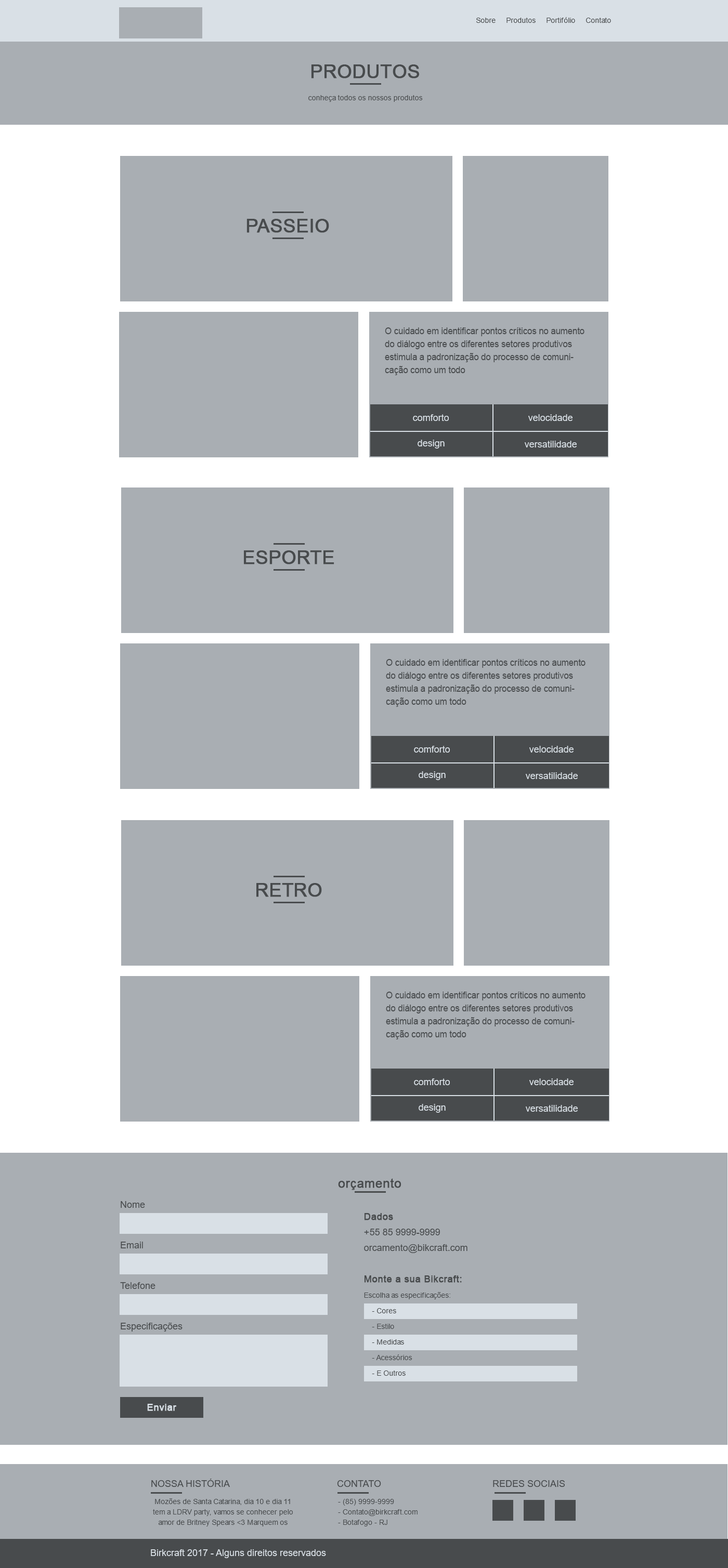
<style>
.page{position:relative;width:728px;height:1568px;background:#a9aeb3}
.page>*{position:absolute;margin:0}
.t1{font:7.3px "ArialMT";color:#484b4d}
.t2{font:18.7px "ArialMT";color:#484b4d;text-transform:uppercase;font-weight:bold}
.t3{font:9.4px/13px "ArialMT";color:#484b4d;scale:0.93 1}
.t4{font:9.4px "ArialMT";color:#d9e0e6}
.t5{font:12.5px "ArialMT";color:#484b4d;font-weight:bold}
.t6{font:9.4px "ArialMT";color:#484b4d}
.t7{font:7.3px/15.6px "ArialMT";color:#484b4d}
.t8{font:9.4px/15.6px "ArialMT";color:#484b4d;font-weight:bold}
.t9{font:9.4px/15.6px "ArialMT";color:#484b4d}
.t10{font:9.4px "ArialMT";color:#d9e0e6;font-weight:bold}
.t11{font:9.4px "ArialMT";color:#484b4d;text-transform:uppercase}
.t12{font:7.3px/10.4px "ArialMT";color:#484b4d}
.t13{font:7.3px/10.4px "ArialMT";color:#d9e0e6}
</style>
<div class="page">
<p class="t1" style="left:476px;top:17px;width:135px;height:6px">Sobre     Produtos     Portifólio     Contato</p>
<p class="t2" style="left:311px;top:64px;width:108px;height:14px">produtos</p>
<p class="t1" style="left:308px;top:95px;width:115px;height:7px">conheça todos os nossos produtos</p>
<p class="t2" style="left:246px;top:219px;width:83px;height:14px">passeio</p>
<p class="t3" style="left:385px;top:327px;width:199px;height:48px">O cuidado em identificar pontos críticos no aumento do diálogo entre os diferentes setores produtivos estimula a padronização do processo de comunicação como um todo</p>
<p class="t4" style="left:413px;top:414px;width:36px;height:7px">comforto</p>
<p class="t4" style="left:528px;top:414px;width:44px;height:7px">velocidade</p>
<p class="t4" style="left:417px;top:440px;width:27px;height:9px">design</p>
<p class="t4" style="left:524px;top:441px;width:52px;height:6px">versatilidade</p>
<p class="t2" style="left:244px;top:550px;width:90px;height:14px">esporte</p>
<p class="t3" style="left:386px;top:659px;width:199px;height:48px">O cuidado em identificar pontos críticos no aumento do diálogo entre os diferentes setores produtivos estimula a padronização do processo de comunicação como um todo</p>
<p class="t4" style="left:414px;top:746px;width:36px;height:7px">comforto</p>
<p class="t4" style="left:529px;top:746px;width:44px;height:7px">velocidade</p>
<p class="t4" style="left:418px;top:771px;width:27px;height:9px">design</p>
<p class="t4" style="left:525px;top:772px;width:52px;height:7px">versatilidade</p>
<p class="t2" style="left:256px;top:883px;width:66px;height:14px">retro</p>
<p class="t3" style="left:386px;top:992px;width:199px;height:47px">O cuidado em identificar pontos críticos no aumento do diálogo entre os diferentes setores produtivos estimula a padronização do processo de comunicação como um todo</p>
<p class="t4" style="left:414px;top:1078px;width:36px;height:7px">comforto</p>
<p class="t4" style="left:529px;top:1078px;width:44px;height:7px">velocidade</p>
<p class="t4" style="left:418px;top:1104px;width:27px;height:9px">design</p>
<p class="t4" style="left:525px;top:1105px;width:52px;height:7px">versatilidade</p>
<p class="t5" style="left:338px;top:1178px;width:63px;height:12px">orçamento</p>
<p class="t6" style="left:121px;top:1201px;width:24px;height:7px">Nome</p>
<p class="t7" style="left:364px;top:1213px;width:103px;height:163px"><span class="t8">Dados<br></span><span class="t9">+55 85 9999-9999<br>orcamento@bikcraft.com<br><br></span><span class="t8">Monte a sua Bikcraft:<br></span>Escolha as especificações: <br>    - Cores<br>    - Estilo<br>    - Medidas<br>    - Acessórios<br>    - E Outros</p>
<p class="t6" style="left:121px;top:1242px;width:22px;height:6px">Email</p>
<p class="t6" style="left:120px;top:1282px;width:35px;height:7px">Telefone</p>
<p class="t6" style="left:121px;top:1323px;width:61px;height:9px">Especificações</p>
<p class="t10" style="left:147px;top:1404px;width:29px;height:7px">Enviar</p>
<p class="t11" style="left:151px;top:1479px;width:79px;height:8px">Nossa História</p>
<p class="t11" style="left:337px;top:1480px;width:44px;height:7px">Contato</p>
<p class="t11" style="left:493px;top:1480px;width:71px;height:7px">redes sociais</p>
<p class="t12" style="left:153px;top:1498px;width:140px;height:28px;text-align:center">Mozões de Santa Catarina, dia 10 e dia 11 tem a LDRV party, vamos se conhecer pelo amor de Britney Spears &lt;3 Marquem os <span class="t13">amigos de Balneário e Floripa e confirmem presença no evento a</span></p>
<p class="t12" style="left:338px;top:1499px;width:79px;height:27px">- (85) 9999-9999<br>- Contato@birkcraft.com<br>- Botafogo - RJ</p>
<p class="t4" style="left:151px;top:1549px;width:175px;height:9px">Birkcraft 2017 - Alguns direitos reservados</p>
</div>
